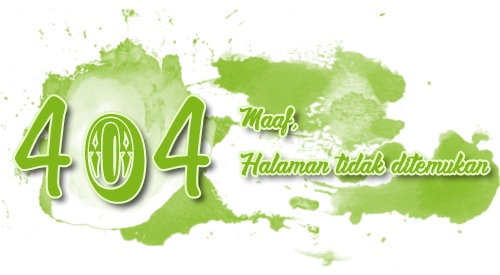
<style>
.page{position:relative;width:500px;height:275px;background:#ffffff}
.page>*{position:absolute;margin:0}
.t1{font:114.3px "VarianeScript";color:#81b71a;font-weight:bold;scale:0.96 1}
.t2{font:114.3px "RosewoodStd-Regular";color:#81b71a;font-weight:bold;scale:0.96 1}
.t3{font:37.9px "Boulevard-Saint-Denis";color:#81b71a;font-weight:bold;scale:0.94 1}
</style>
<div class="page">
<p class="t1" style="left:15px;top:96px;width:194px;height:106px">4<span class="t2">0</span>4</p>
<p class="t3" style="left:239px;top:107px;width:250px;height:69px">Maaf,<br>Halaman tidak ditemukan</p>
</div>
